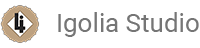
<style>
.page{position:relative;width:200px;height:48px;background:#ffffff}
.page>*{position:absolute;margin:0}
.t1{font:26px "Roboto-Regular";color:#757575}
</style>
<div class="page">
<p class="t1" style="left:58px;top:12px;width:141px;height:25px">Igolia Studio</p>
</div>
